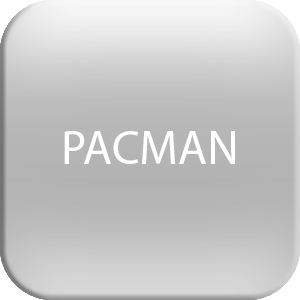
<style>
.page{position:relative;width:300px;height:300px}
.page>*{position:absolute;margin:0}
.t1{font:48px "MyriadPro-Regular";color:#ffffff}
</style>
<div class="page">
<p class="t1" style="left:64px;top:131px;width:171px;height:33px">PACMAN</p>
</div>
